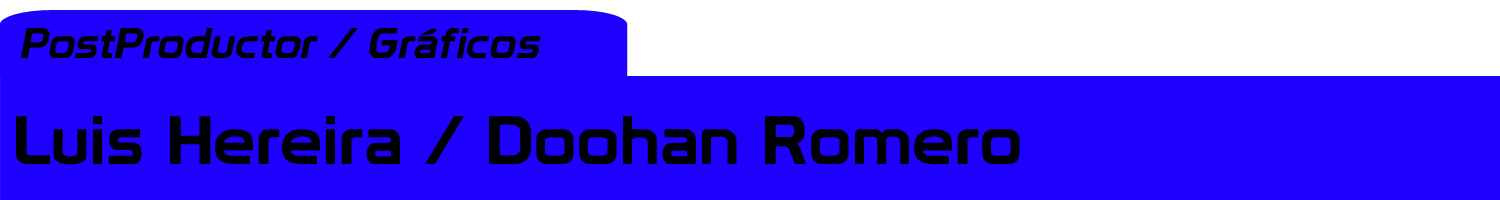
<style>
.page{position:relative;width:1500px;height:200px;background:#1e00ff}
.page>*{position:absolute;margin:0}
.t1{font:41.7px "Prototype";letter-spacing:0.01em;color:#000000;font-style:italic;scale:1.1 1}
.t2{font:66.9px "Prototype";letter-spacing:0.01em;color:#000000;scale:1.1 1}
</style>
<div class="page">
<p class="t1" style="left:21px;top:28px;width:520px;height:31px">PostProductor / Gráficos</p>
<p class="t2" style="left:16px;top:116px;width:1004px;height:49px">Luis Hereira / Doohan Romero</p>
</div>
